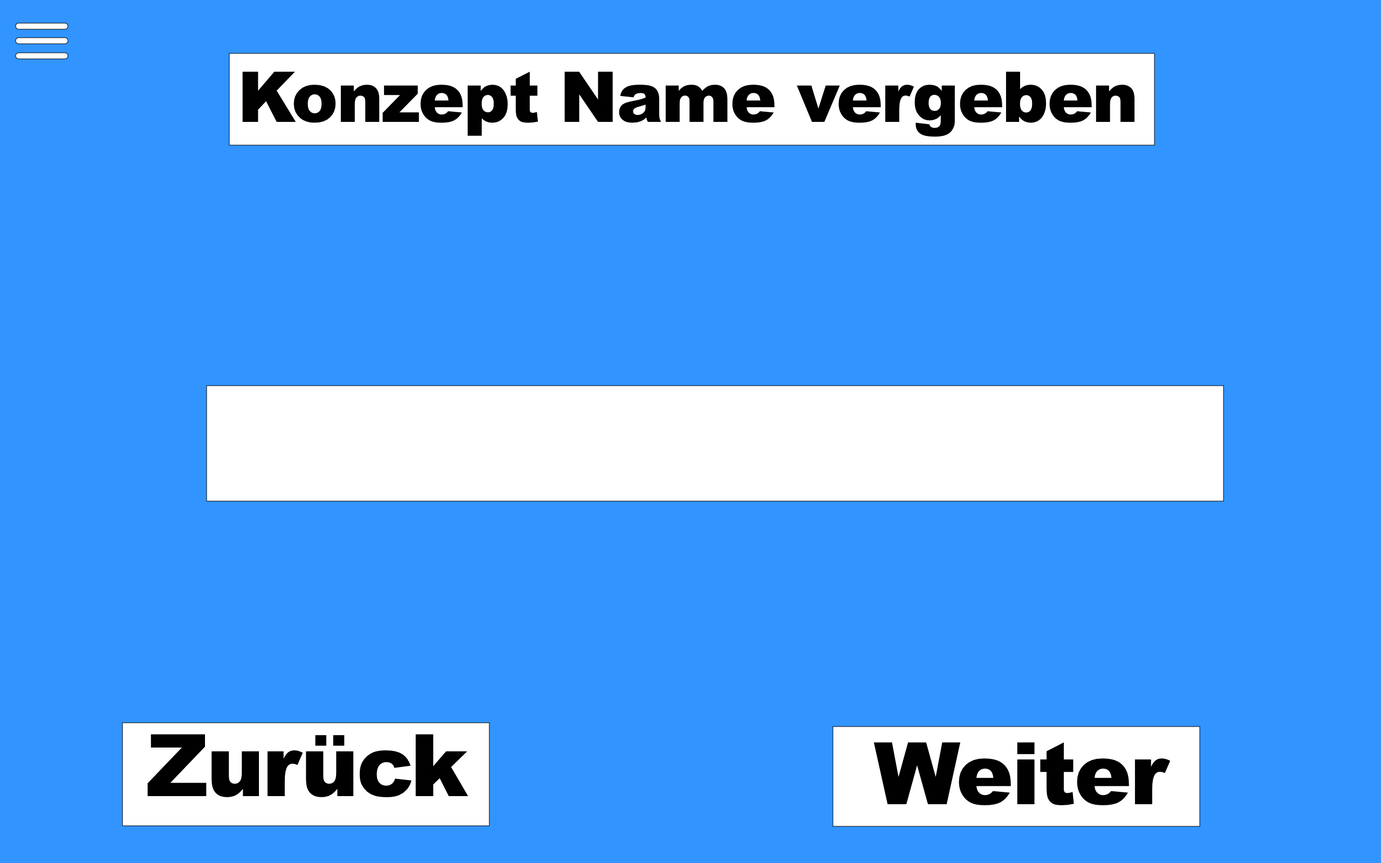
<style>
.page{position:relative;width:1381px;height:863px;background:#3194ff}
.page>*{position:absolute;margin:0}
.t1{font:70.1px "Arial-Black";letter-spacing:-0.024em;color:#000000}
.t2{font:86.3px "Arial-Black";letter-spacing:-0.024em;color:#000000}
</style>
<div class="page">
<p class="t1" style="left:242px;top:71px;width:893px;height:66px">Konzept Name vergeben</p>
<p class="t2" style="left:147px;top:734px;width:321px;height:63px">Zurück</p>
<p class="t2" style="left:874px;top:742px;width:297px;height:64px">Weiter</p>
</div>
